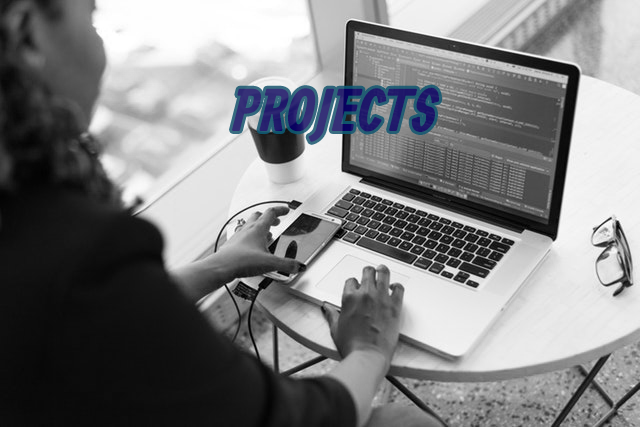
<style>
.page{position:relative;width:640px;height:427px}
.page>*{position:absolute;margin:0}
.t1{font:60px "Allan-Bold";color:#251e6d}
</style>
<div class="page">
<p class="t1" style="left:232px;top:87px;width:207px;height:55px">PROJECTS</p>
</div>
